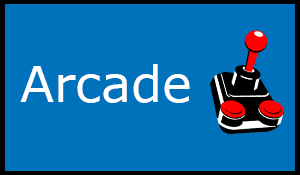
<style>
.page{position:relative;width:300px;height:175px;background:#0072bc}
.page>*{position:absolute;margin:0}
.t1{font:50px "MSReferenceSansSerif";color:#ffffff}
</style>
<div class="page">
<p class="t1" style="left:20px;top:64px;width:170px;height:39px">Arcade</p>
</div>
